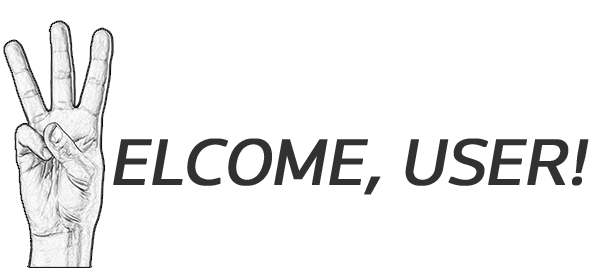
<style>
.page{position:relative;width:597px;height:270px;background:#ffffff}
.page>*{position:absolute;margin:0}
.t1{font:67.3px "Knowledge-Regular";letter-spacing:-0.01em;color:#313131;font-weight:bold;font-style:italic}
</style>
<div class="page">
<p class="t1" style="left:113px;top:138px;width:476px;height:57px">ELCOME, USER!</p>
</div>
